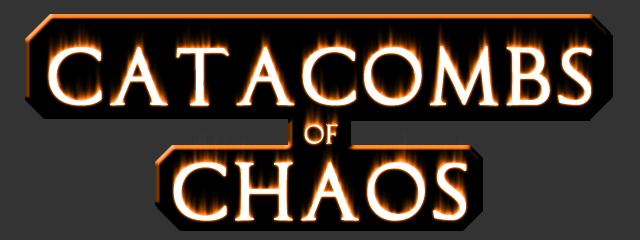
<style>
.page{position:relative;width:640px;height:240px;background:#333333}
.page>*{position:absolute;margin:0}
.t1{font:72px "CapitalisTypOasisMedium";color:#ffffff;font-weight:bold}
.t2{font:24px "CapitalisTypOasisMedium";color:#ffffff}
</style>
<div class="page">
<p class="t1" style="left:48px;top:46px;width:544px;height:175px;text-align:center">CATACOMBS<br><span class="t2">OF<br></span>CHAOS</p>
</div>
